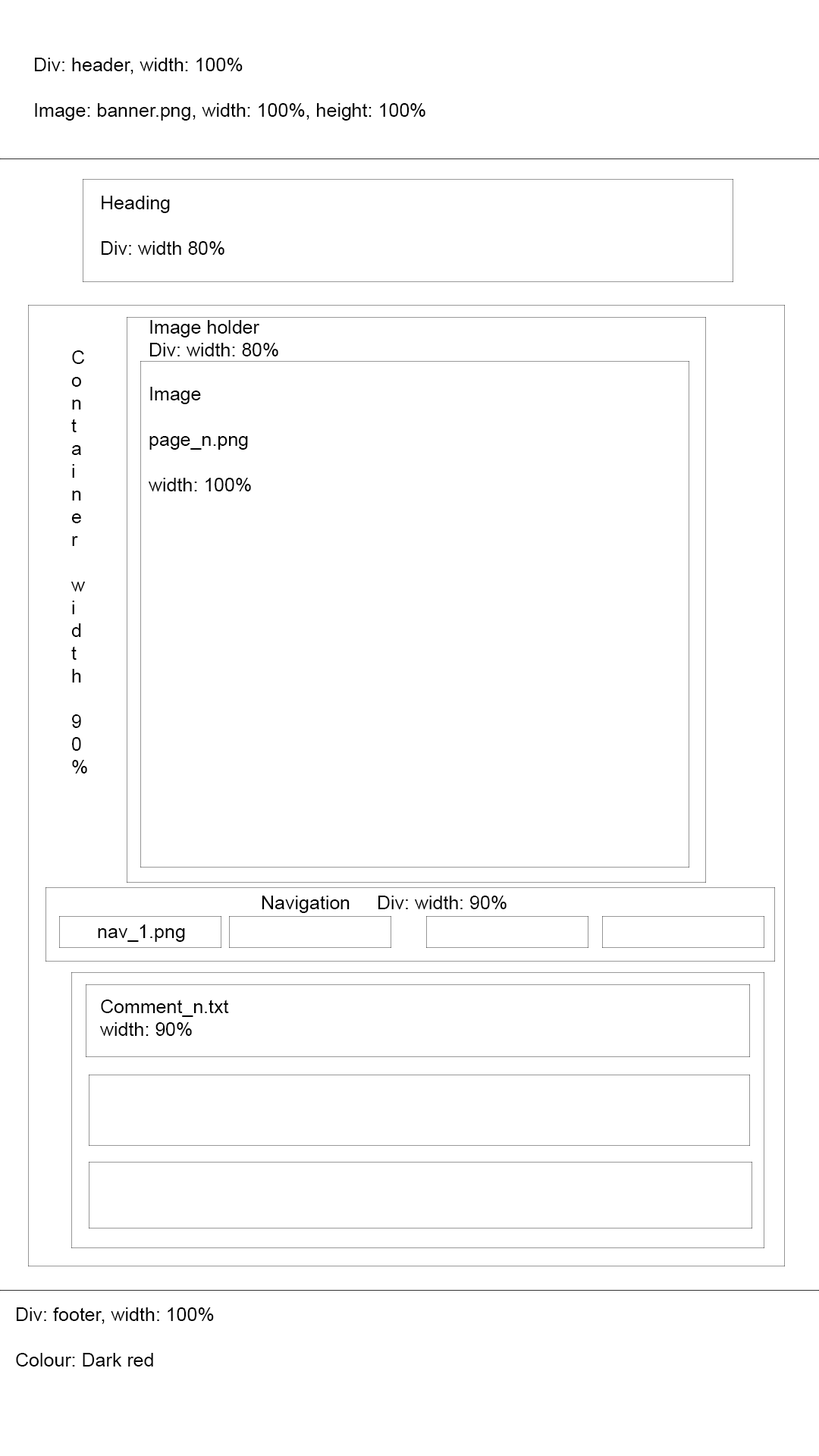
<style>
.page{position:relative;width:819px;height:1456px;background:#ffffff}
.page>*{position:absolute;margin:0}
.t1{font:19px "ArialMT";color:#000000}
</style>
<div class="page">
<p class="t1" style="left:35px;top:58px;width:390px;height:63px">Div: header, width: 100%<br><br>Image: banner.png, width: 100%, height: 100%</p>
<p class="t1" style="left:102px;top:196px;width:122px;height:59px">Heading<br><br>Div: width 80%</p>
<p class="t1" style="left:150px;top:320px;width:128px;height:36px">Image holder<br>Div: width: 80%</p>
<p class="t1" style="left:71px;top:350px;width:16px;height:423px">C<br>o<br>n<br>t<br>a<br>i<br>n<br>e<br>r<br><br>w<br>i<br>d<br>t<br>h<br><br>9<br>0<br>%</p>
<p class="t1" style="left:148px;top:387px;width:103px;height:104px">Image<br><br>page_n.png<br><br>width: 100%</p>
<p class="t1" style="left:262px;top:896px;width:245px;height:17px">Navigation     Div: width: 90%</p>
<p class="t1" style="left:98px;top:924px;width:87px;height:18px">nav_1.png</p>
<p class="t1" style="left:99px;top:999px;width:130px;height:37px">Comment_n.txt<br>width: 90%</p>
<p class="t1" style="left:16px;top:1307px;width:198px;height:59px">Div: footer, width: 100%<br><br>Colour: Dark red</p>
</div>
